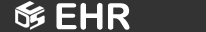
<style>
.page{position:relative;width:206px;height:32px;background:#333333}
.page>*{position:absolute;margin:0}
.t1{font:36px "ArialRoundedMTBold";color:#ffffff}
</style>
<div class="page">
<p class="t1" style="left:56px;top:2px;width:74px;height:28px">EHR</p>
</div>
